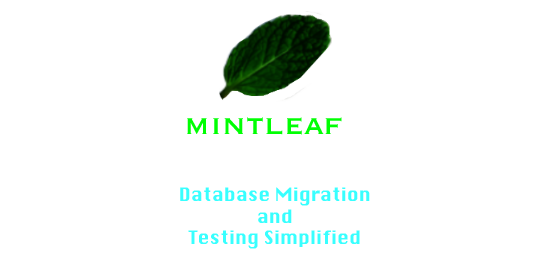
<style>
.page{position:relative;width:540px;height:264px;background:#ffffff}
.page>*{position:absolute;margin:0}
.t1{font:36px "Copperplate";color:#00ff03}
.t2{font:18px "Krungthep";color:#38ffff}
</style>
<div class="page">
<p class="t1" style="left:187px;top:117px;width:155px;height:18px">mintleaf</p>
<p class="t2" style="left:180px;top:187px;width:190px;height:62px;text-align:center">Database Migration <br>and <br>Testing Simplified</p>
</div>
